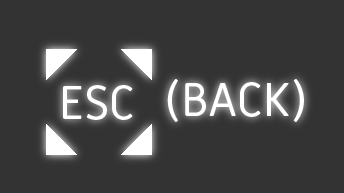
<style>
.page{position:relative;width:344px;height:193px;background:#333333}
.page>*{position:absolute;margin:0}
.t1{font:48px "MiriamLibre-Regular";color:#ffffff}
</style>
<div class="page">
<p class="t1" style="left:63px;top:85px;width:70px;height:35px">ESC</p>
<p class="t1" style="left:167px;top:79px;width:137px;height:43px">(BACK)</p>
</div>
